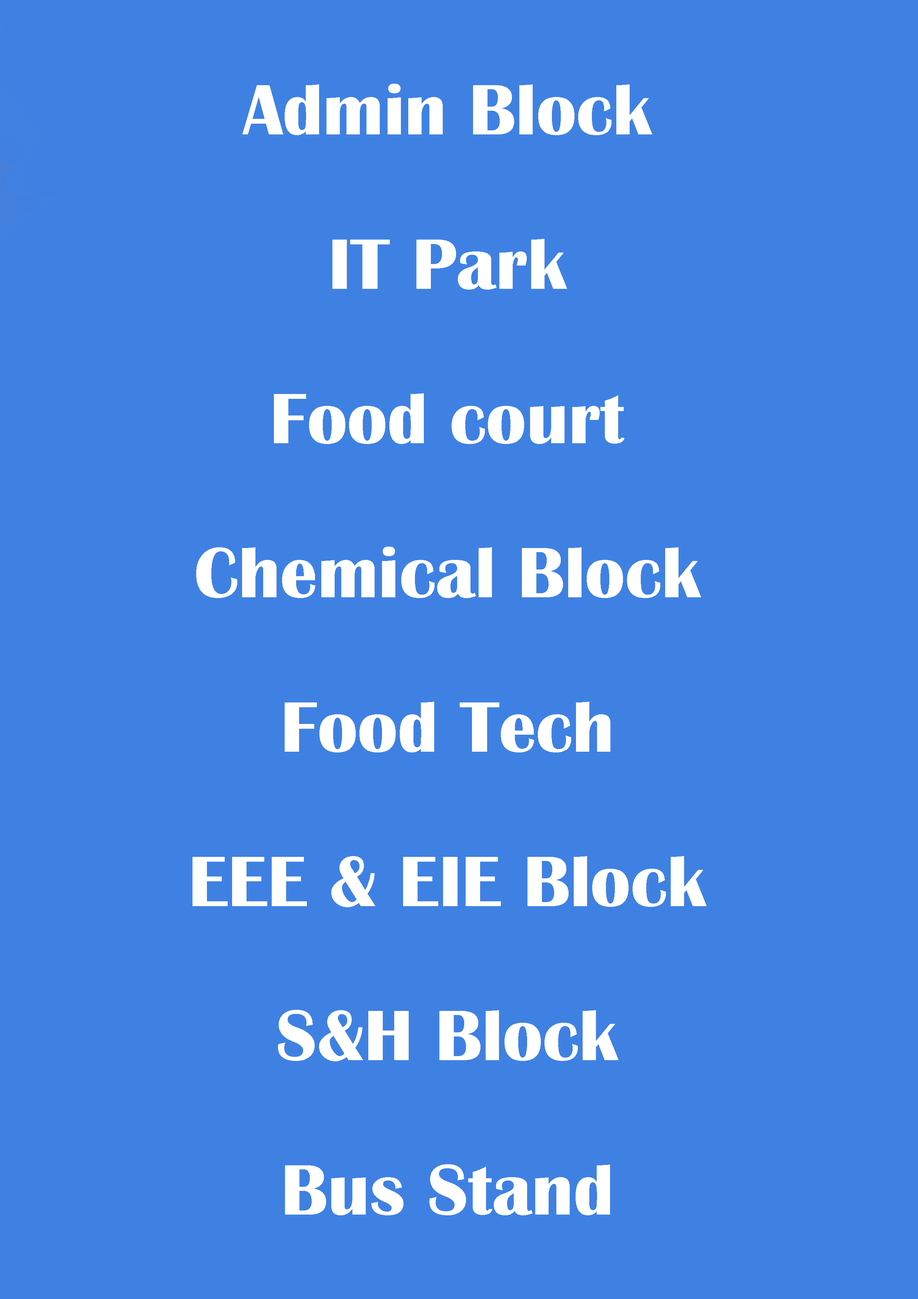
<style>
.page{position:relative;width:918px;height:1299px;background:#3f81e3}
.page>*{position:absolute;margin:0}
.t1{font:74px/154.3px "BritannicBold";letter-spacing:0.002em;color:#ffffff}
</style>
<div class="page">
<p class="t1" style="left:193px;top:84px;width:514px;height:1131px;text-align:center">Admin Block<br>IT Park<br>Food court<br>Chemical Block<br>Food Tech<br>EEE &amp; EIE Block<br>S&amp;H Block<br>Bus Stand</p>
</div>
